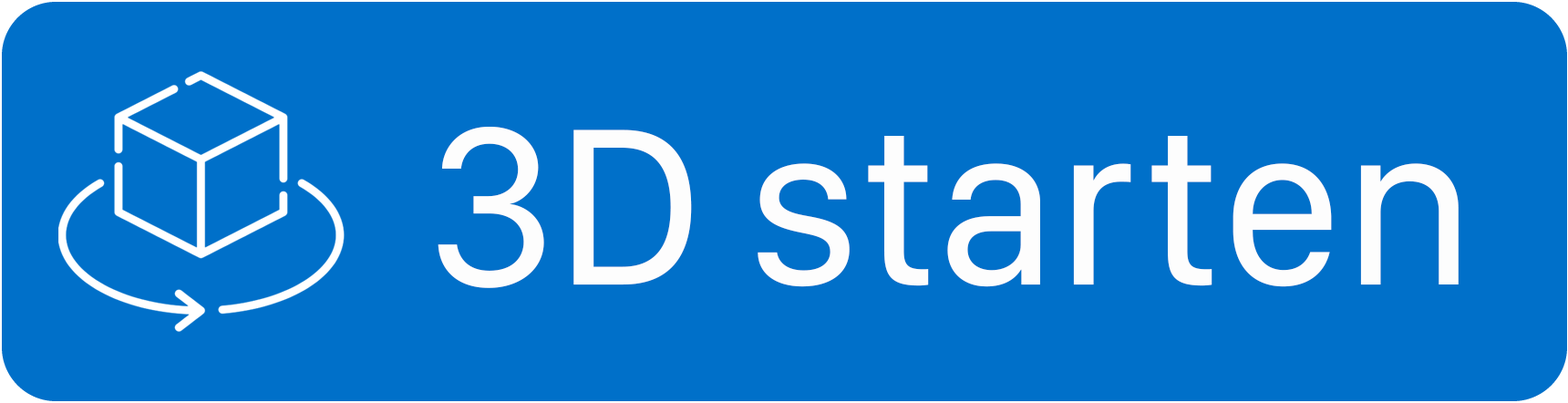
<style>
.page{position:relative;width:1568px;height:403px;background:#0070c9}
.page>*{position:absolute;margin:0}
.t1{font:231.7px "SFCompactDisplay-Regular";color:#fdfdfd}
</style>
<div class="page">
<p class="t1" style="left:438px;top:126px;width:1021px;height:162px">3D starten</p>
</div>
